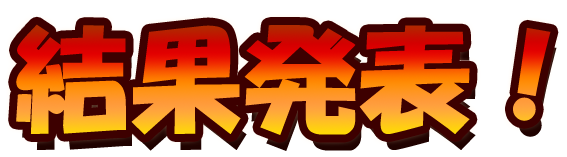
<style>
.page{position:relative;width:567px;height:157px;background:#ffffff}
.page>*{position:absolute;margin:0}
.t1{font:114.6px "HGSoeiKakupoptai"}
</style>
<div class="page">
<p class="t1" style="left:16px;top:24px;width:535px;height:111px">結果発表！</p>
</div>
